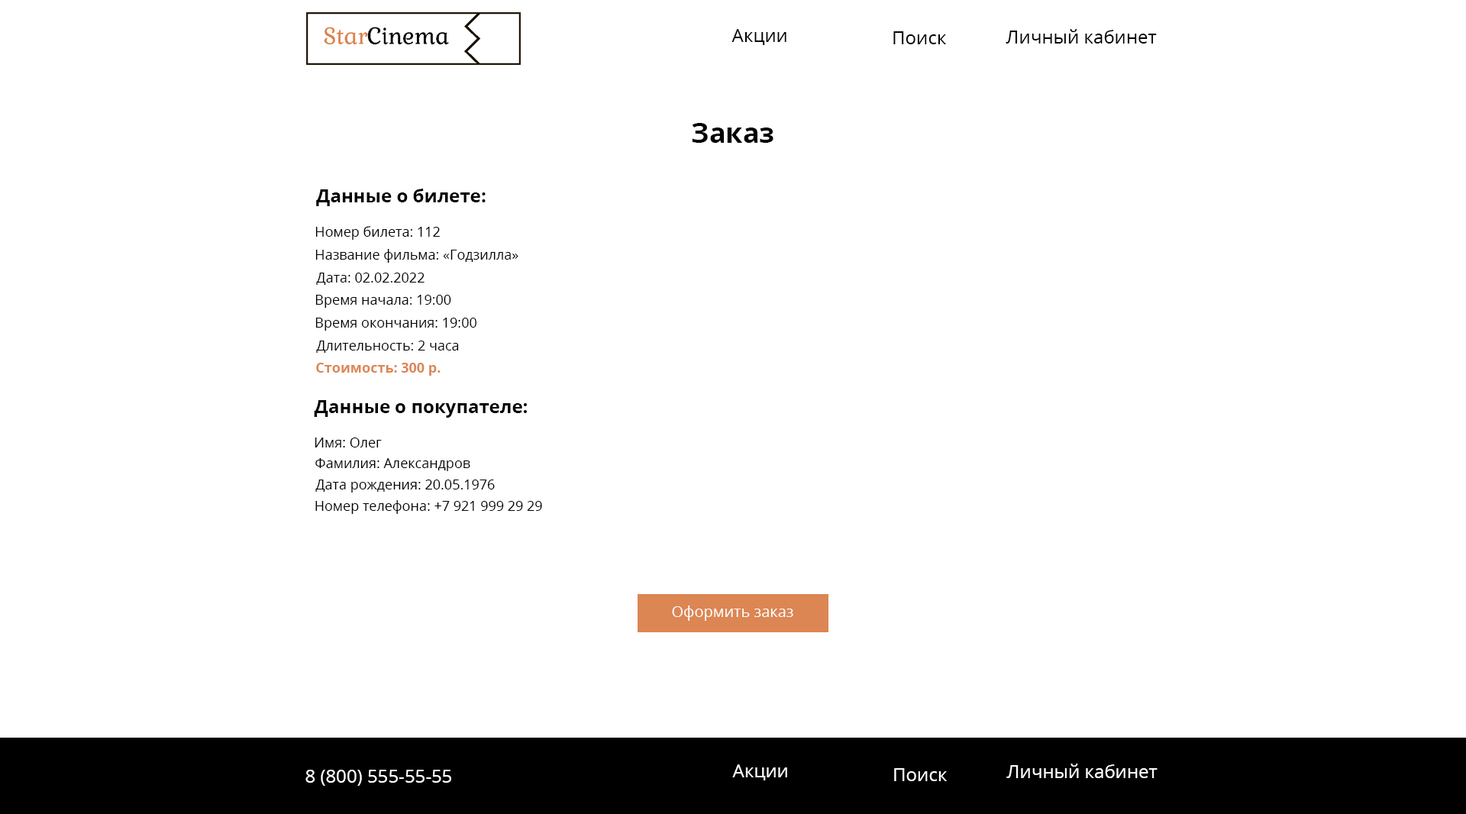
<style>
.page{position:relative;width:1466px;height:814px;background:#ffffff}
.page>*{position:absolute;margin:0}
.t1{font:18.3px "OpenSans-Regular";color:#000000}
.t2{font:27.5px "OpenSans-Bold";color:#000000}
.t3{font:18.3px "OpenSans-Bold";color:#000000}
.t4{font:13.7px "OpenSans-Regular";color:#000000}
.t5{font:13.7px "OpenSans-Bold";color:#dc8653}
.t6{font:15.3px "OpenSans-Regular";color:#ffffff}
.t7{font:18.3px "OpenSans-Regular";color:#ffffff}
</style>
<div class="page">
<p class="t1" style="left:731px;top:29px;width:55px;height:16px">Акции</p>
<p class="t1" style="left:1005px;top:29px;width:151px;height:15px">Личный кабинет</p>
<p class="t1" style="left:893px;top:31px;width:53px;height:13px">Поиск</p>
<p class="t2" style="left:692px;top:123px;width:81px;height:20px">Заказ</p>
<p class="t3" style="left:316px;top:189px;width:169px;height:17px">Данные о билете:</p>
<p class="t4" style="left:315px;top:226px;width:125px;height:14px">Номер билета: 112</p>
<p class="t4" style="left:315px;top:249px;width:203px;height:14px">Название фильма: «Годзилла»</p>
<p class="t4" style="left:316px;top:272px;width:108px;height:13px">Дата: 02.02.2022</p>
<p class="t4" style="left:315px;top:295px;width:136px;height:13px">Время начала: 19:00</p>
<p class="t4" style="left:315px;top:318px;width:161px;height:13px">Время окончания: 19:00</p>
<p class="t4" style="left:316px;top:340px;width:143px;height:13px">Длительность: 2 часа</p>
<p class="t5" style="left:316px;top:363px;width:124px;height:13px">Стоимость: 300 р.</p>
<p class="t3" style="left:314px;top:400px;width:213px;height:18px">Данные о покупателе:</p>
<p class="t4" style="left:314px;top:437px;width:68px;height:10px">Имя: Олег</p>
<p class="t4" style="left:315px;top:458px;width:155px;height:13px">Фамилия: Александров</p>
<p class="t4" style="left:315px;top:479px;width:180px;height:13px">Дата рождения: 20.05.1976</p>
<p class="t4" style="left:315px;top:500px;width:227px;height:14px">Номер телефона: +7 921 999 29 29</p>
<p class="t6" style="left:672px;top:605px;width:121px;height:16px">Оформить заказ</p>
<p class="t7" style="left:305px;top:769px;width:146px;height:16px">8 (800) 555-55-55</p>
<p class="t7" style="left:732px;top:764px;width:55px;height:16px">Акции</p>
<p class="t7" style="left:894px;top:768px;width:52px;height:13px">Поиск</p>
<p class="t7" style="left:1006px;top:763px;width:151px;height:15px">Личный кабинет</p>
</div>
